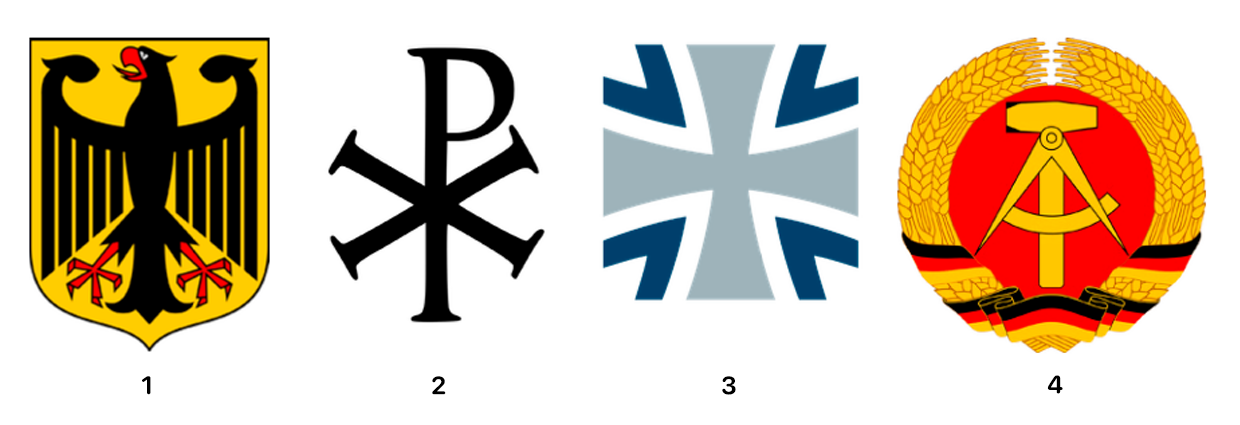
<style>
.page{position:relative;width:1240px;height:425px;background:#ffffff}
.page>*{position:absolute;margin:0}
.t1{font:25px "SFProRounded-Bold";color:#000000}
</style>
<div class="page">
<p class="t1" style="left:142px;top:376px;width:9px;height:19px">1</p>
<p class="t1" style="left:432px;top:376px;width:14px;height:19px">2</p>
<p class="t1" style="left:722px;top:376px;width:14px;height:19px">3</p>
<p class="t1" style="left:1047px;top:375px;width:16px;height:19px">4</p>
</div>
